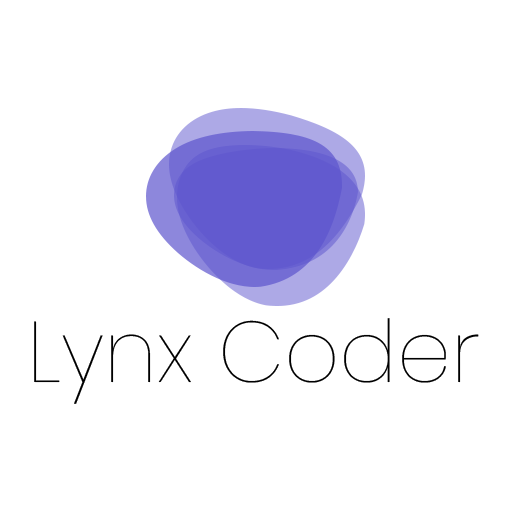
<style>
.page{position:relative;width:512px;height:512px;background:#ffffff}
.page>*{position:absolute;margin:0}
.t1{font:20.6px "Poppins-Thin";color:#000000}
</style>
<div class="page">
<p class="t1" style="left:34px;top:318px;width:445px;height:86px">Lynx Coder</p>
</div>
